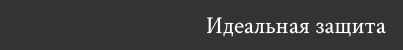
<style>
.page{position:relative;width:403px;height:50px;background:#333333}
.page>*{position:absolute;margin:0}
.t1{font:24px "CrimsonText-Regular";color:#ffffff}
</style>
<div class="page">
<p class="t1" style="left:207px;top:17px;width:179px;height:20px">Идеальная защита</p>
</div>
